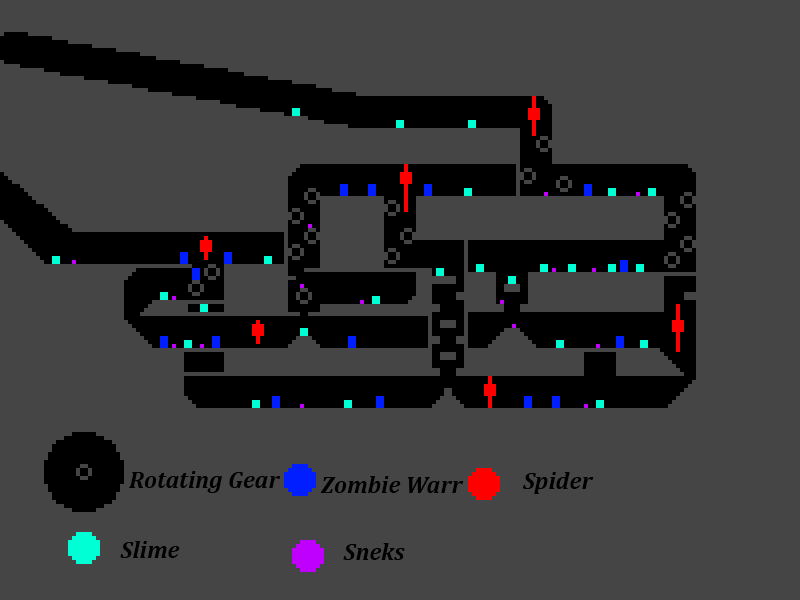
<style>
.page{position:relative;width:800px;height:600px;background:#454545}
.page>*{position:absolute;margin:0}
.t1{font:24px "Cambria-BoldItalic";color:#000000}
</style>
<div class="page">
<p class="t1" style="left:129px;top:471px;width:152px;height:22px">Rotating Gear</p>
<p class="t1" style="left:523px;top:472px;width:71px;height:22px">Spider</p>
<p class="t1" style="left:320px;top:476px;width:144px;height:17px">Zombie Warr</p>
<p class="t1" style="left:120px;top:541px;width:60px;height:17px">Slime</p>
<p class="t1" style="left:343px;top:543px;width:62px;height:17px">Sneks</p>
</div>
